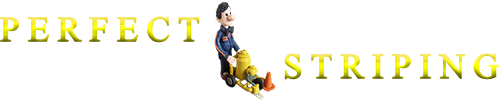
<style>
.page{position:relative;width:500px;height:100px;background:#ffffff}
.page>*{position:absolute;margin:0}
.t1{font:35.4px "MongolianBaiti";letter-spacing:0.2em;font-weight:bold}
</style>
<div class="page">
<p class="t1" style="left:0px;top:16px;width:200px;height:27px">PERFECT</p>
<p class="t1" style="left:284px;top:53px;width:215px;height:27px">STRIPING</p>
</div>
